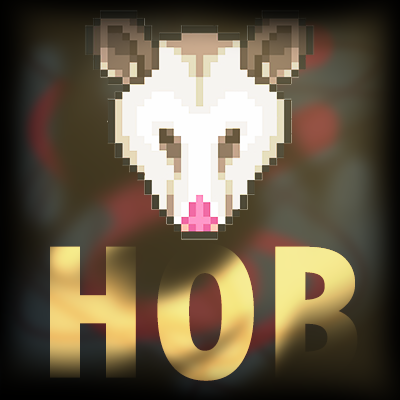
<style>
.page{position:relative;width:400px;height:400px}
.page>*{position:absolute;margin:0}
.t1{font:200px "TwCenMT-CondensedExtraBold";color:#e6c473}
</style>
<div class="page">
<p class="t1" style="left:50px;top:243px;width:308px;height:138px">HOB</p>
</div>
